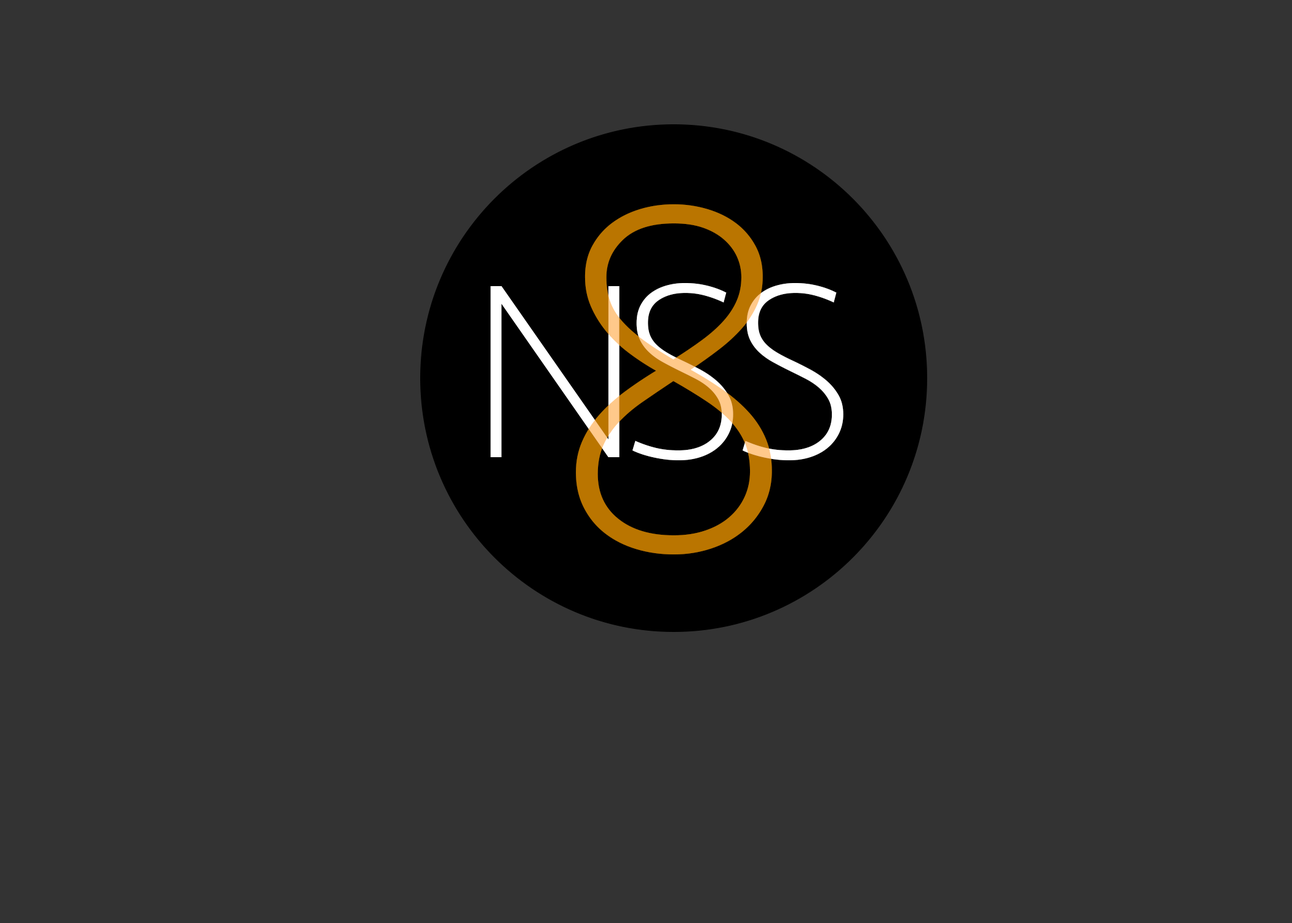
<style>
.page{position:relative;width:1292px;height:923px;background:#333333}
.page>*{position:absolute;margin:0}
.t1{font:507.8px "Seravek-ExtraLight";letter-spacing:0.05em;color:#ba7500}
.t2{font:256.4px "Seravek-ExtraLight";letter-spacing:0.05em;color:#ffffff}
</style>
<div class="page">
<p class="t1" style="left:576px;top:204px;width:196px;height:350px">8</p>
<p class="t2" style="left:490px;top:286px;width:130px;height:171px">N</p>
<p class="t2" style="left:632px;top:283px;width:101px;height:177px">S</p>
<p class="t2" style="left:743px;top:283px;width:101px;height:177px">S</p>
</div>
